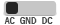
<style>
.page{position:relative;width:60px;height:25px;background:#c6c6c6}
.page>*{position:absolute;margin:0}
.t1{font:10px "FranklinGothic-MediumCond";color:#4a4a4a}
</style>
<div class="page">
<p class="t1" style="left:4px;top:17px;width:11px;height:7px">AC</p>
<p class="t1" style="left:20px;top:17px;width:17px;height:7px">GND</p>
<p class="t1" style="left:42px;top:17px;width:11px;height:7px">DC</p>
</div>
